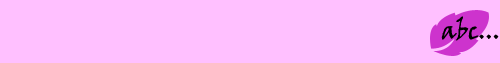
<style>
.page{position:relative;width:500px;height:63px;background:#ffc0ff}
.page>*{position:absolute;margin:0}
.t1{font:24px "VinerHandITC";color:#000000}
</style>
<div class="page">
<p class="t1" style="left:441px;top:16px;width:58px;height:25px">abc...</p>
</div>
